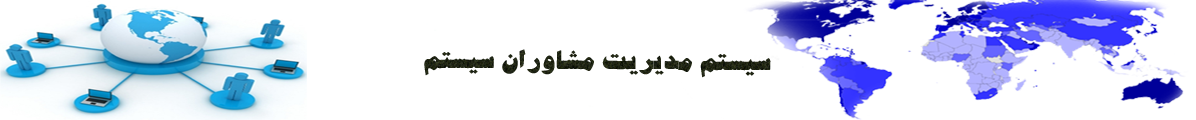
<style>
.page{position:relative;width:1196px;height:120px;background:#ffffff}
.page>*{position:absolute;margin:0}
.t1{font:25.9px "BJadidBold";color:#1f2514;scale:1.12 1}
</style>
<div class="page">
<p class="t1" style="left:424px;top:49px;width:347px;height:29px">سیستم مدیریت مشاوران سیستم</p>
</div>
